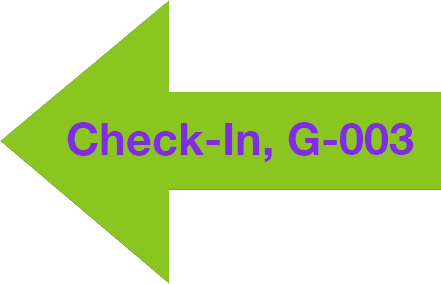
<style>
.page{position:relative;width:441px;height:284px;background:#ffffff}
.page>*{position:absolute;margin:0}
.t1{font:45px "HelveticaNeue-Bold";color:#7f2ddf}
</style>
<div class="page">
<p class="t1" style="left:67px;top:122px;width:347px;height:40px">Check-In, G-003</p>
</div>
